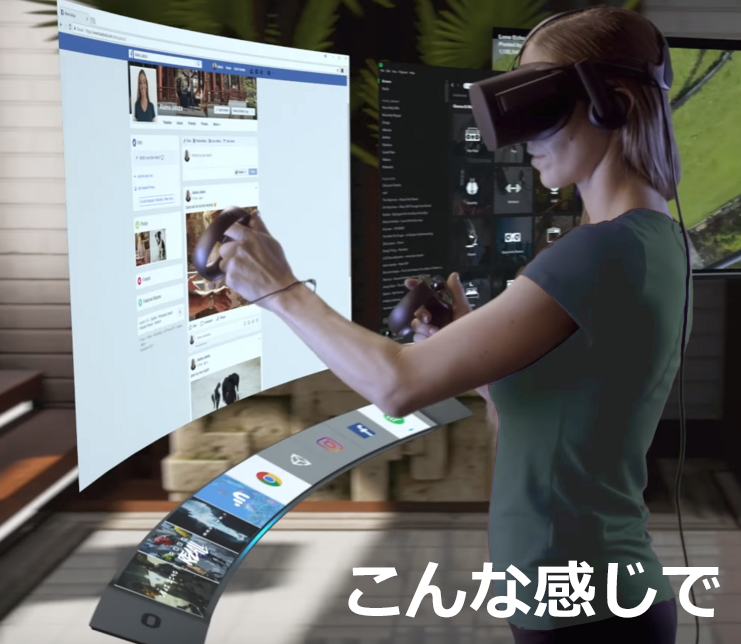
<style>
.page{position:relative;width:741px;height:644px}
.page>*{position:absolute;margin:0}
.t1{font:63.8px "Meiryo-Bold";color:#ffffff}
</style>
<div class="page">
<p class="t1" style="left:348px;top:560px;width:372px;height:58px">こんな感じで</p>
</div>
